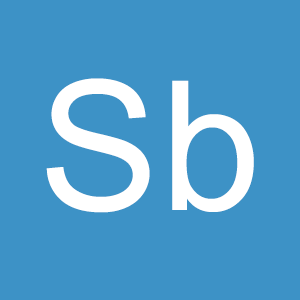
<style>
.page{position:relative;width:300px;height:300px;background:#3d92c6}
.page>*{position:absolute;margin:0}
.t1{font:180.6px "ArialMT";letter-spacing:0.01em;color:#ffffff}
</style>
<div class="page">
<p class="t1" style="left:46px;top:78px;width:208px;height:135px">Sb</p>
</div>
